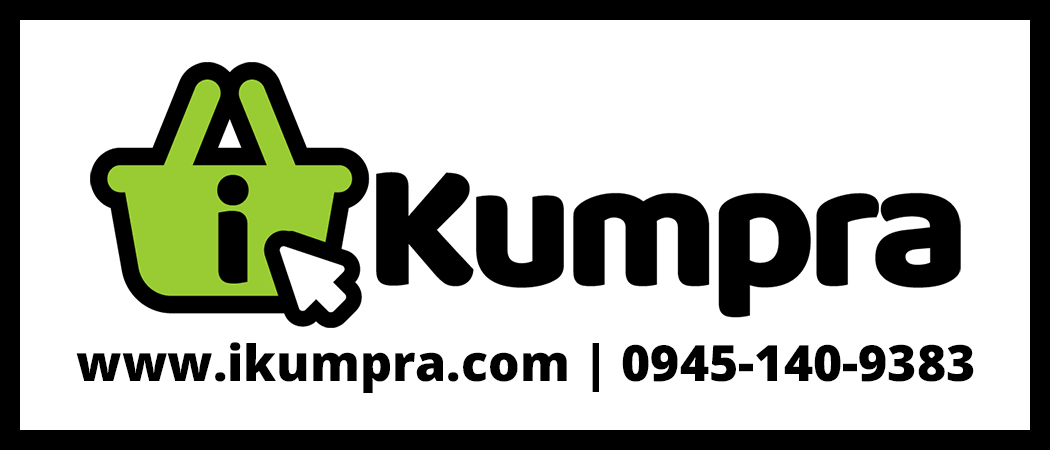
<style>
.page{position:relative;width:1050px;height:450px;background:#ffffff}
.page>*{position:absolute;margin:0}
.t1{font:50px "OpenSans-Extrabold";color:#000000}
</style>
<div class="page">
<p class="t1" style="left:76px;top:342px;width:898px;height:51px">www.ikumpra.com | 0945-140-9383</p>
</div>
